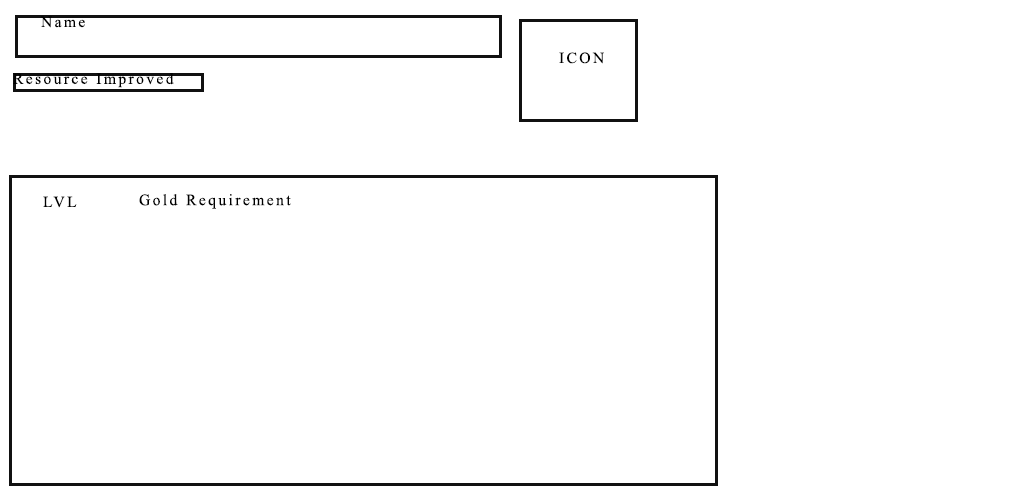
<style>
.page{position:relative;width:1033px;height:503px;background:#ffffff}
.page>*{position:absolute;margin:0}
.t1{font:15.5px "TimesNewRomanPSMT";letter-spacing:0.155em;color:#000000}
.t2{font:15.8px "TimesNewRomanPSMT";letter-spacing:0.155em;color:#000000}
</style>
<div class="page">
<p class="t1" style="left:40px;top:16px;width:45px;height:12px">Name</p>
<p class="t1" style="left:559px;top:52px;width:45px;height:12px">ICON</p>
<p class="t1" style="left:13px;top:73px;width:161px;height:15px">Resource Improved</p>
<p class="t1" style="left:43px;top:196px;width:34px;height:12px">LVL</p>
<p class="t2" style="left:139px;top:194px;width:152px;height:15px">Gold Requirement</p>
</div>
